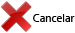
<style>
.page{position:relative;width:75px;height:33px;background:#ffffff}
.page>*{position:absolute;margin:0}
.t1{font:11px "SegoeUI";color:#000000}
</style>
<div class="page">
<p class="t1" style="left:33px;top:14px;width:42px;height:8px">Cancelar</p>
</div>
